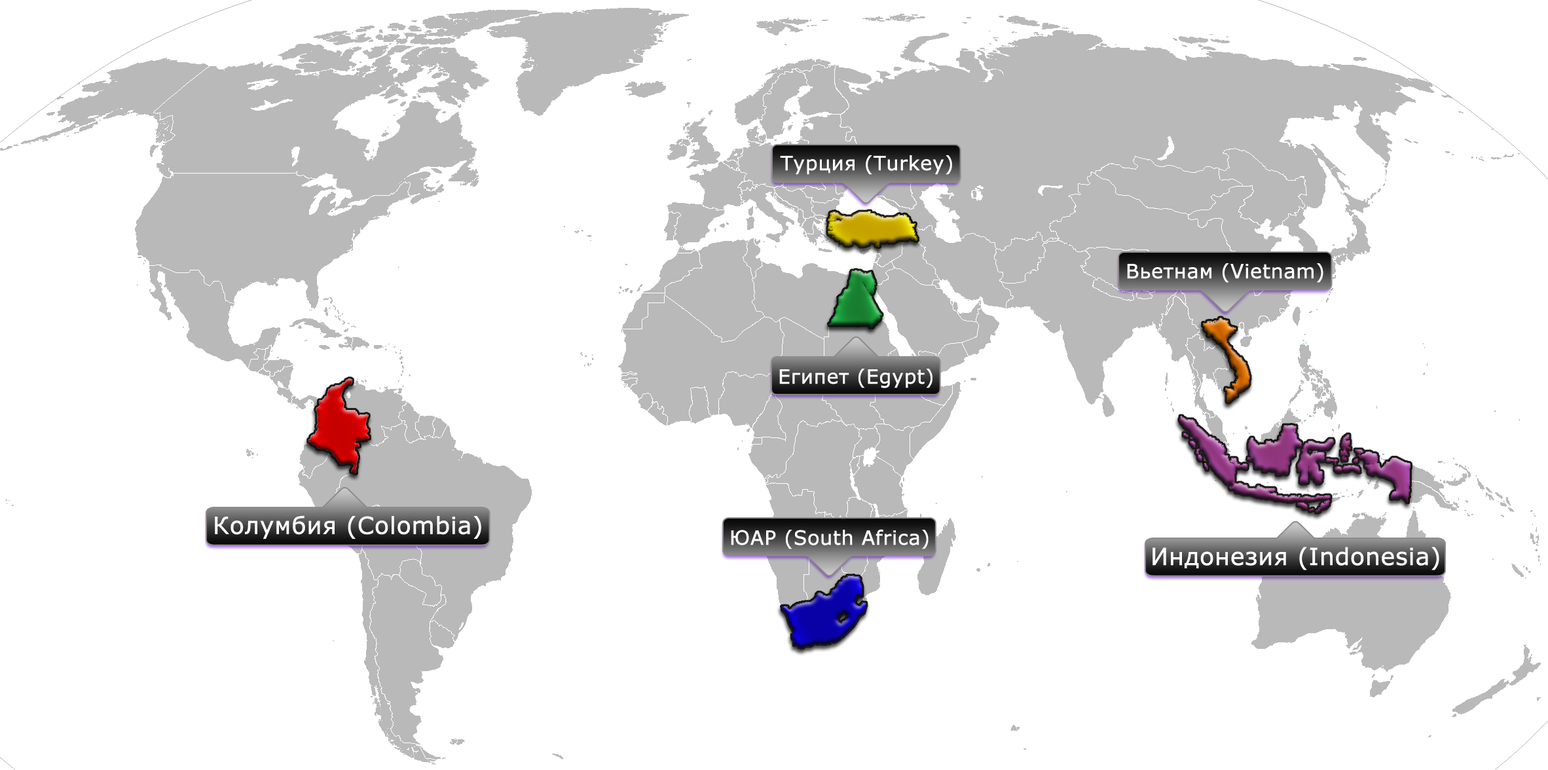
<style>
.page{position:relative;width:1548px;height:770px;background:#ffffff}
.page>*{position:absolute;margin:0}
.t1{font:19.7px "Verdana";color:#ffffff;font-weight:bold}
.t2{font:23.6px "Verdana";color:#ffffff;font-weight:bold}
</style>
<div class="page">
<p class="t1" style="left:780px;top:155px;width:172px;height:20px">Турция (Turkey)</p>
<p class="t1" style="left:1127px;top:263px;width:197px;height:20px">Вьетнам (Vietnam)</p>
<p class="t1" style="left:779px;top:369px;width:154px;height:19px">Египет (Egypt)</p>
<p class="t2" style="left:215px;top:515px;width:266px;height:24px">Колумбия (Colombia)</p>
<p class="t1" style="left:731px;top:529px;width:198px;height:20px">ЮАР (South Africa)</p>
<p class="t2" style="left:1153px;top:547px;width:287px;height:23px">Индонезия (Indonesia)</p>
</div>
